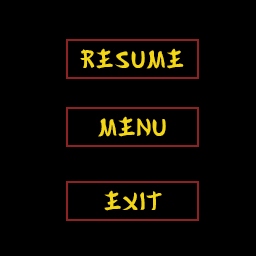
<style>
.page{position:relative;width:256px;height:256px;background:#000000}
.page>*{position:absolute;margin:0}
.t1{font:24px "Gyosho";color:#f3d717}
</style>
<div class="page">
<p class="t1" style="left:80px;top:48px;width:104px;height:21px">RESUME</p>
<p class="t1" style="left:98px;top:116px;width:68px;height:21px">MENU</p>
<p class="t1" style="left:104px;top:190px;width:58px;height:21px">EXIT</p>
</div>
